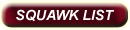
<style>
.page{position:relative;width:130px;height:30px}
.page>*{position:absolute;margin:0}
.t1{font:14px "Arial-BoldItalicMT";color:#fcfbf9}
</style>
<div class="page">
<p class="t1" style="left:16px;top:9px;width:98px;height:13px">SQUAWK LIST</p>
</div>
